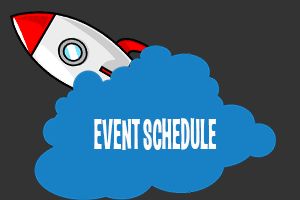
<style>
.page{position:relative;width:300px;height:200px;background:#333333}
.page>*{position:absolute;margin:0}
.t1{font:44.5px "LasVegas-Jackpot";color:#fcfcfc;text-transform:uppercase;scale:0.6 1}
</style>
<div class="page">
<p class="t1" style="left:94px;top:118px;width:123px;height:32px">event schedule</p>
</div>
